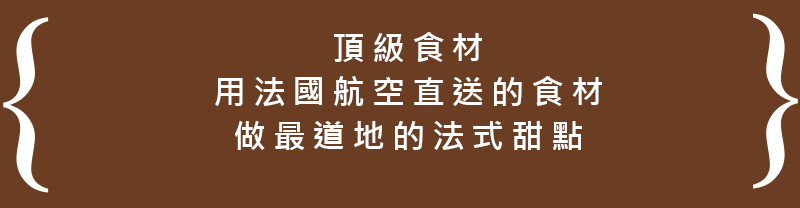
<style>
.page{position:relative;width:800px;height:208px;background:#6b3d23}
.page>*{position:absolute;margin:0}
.t1{font:33.1px/44.2px "MicrosoftJhengHeiBold";letter-spacing:0.2em;color:#ffffff}
</style>
<div class="page">
<p class="t1" style="left:215px;top:32px;width:387px;height:118px;text-align:center">頂級食材<br>用法國航空直送的食材<br>做最道地的法式甜點</p>
</div>
